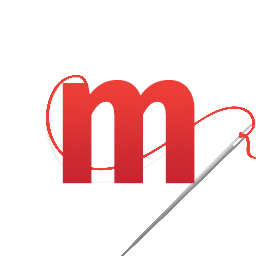
<style>
.page{position:relative;width:256px;height:256px;background:#ffffff}
.page>*{position:absolute;margin:0}
.t1{font:188.2px "FiraSans-Bold";color:#ef3f37;scale:0.96 1}
</style>
<div class="page">
<p class="t1" style="left:62px;top:80px;width:133px;height:104px">m</p>
</div>
